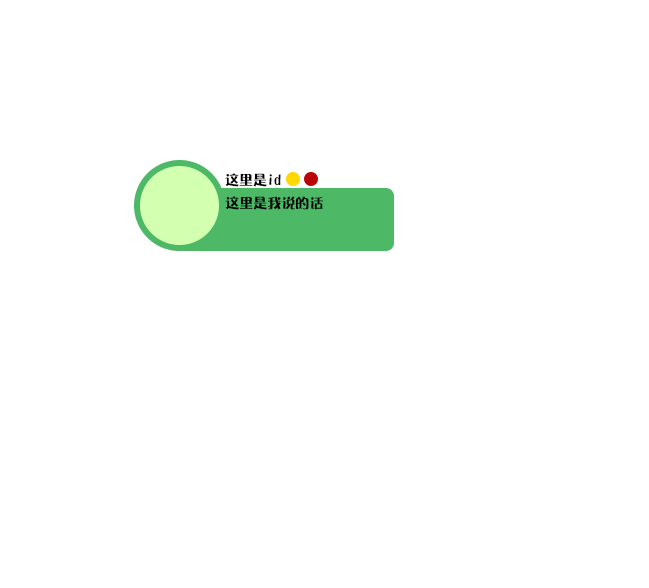
<style>
.page{position:relative;width:649px;height:588px;background:#ffffff}
.page>*{position:absolute;margin:0}
.t1{font:14px "DFPOP3W12";color:#000000}
</style>
<div class="page">
<p class="t1" style="left:225px;top:173px;width:56px;height:14px">这里是id</p>
<p class="t1" style="left:225px;top:196px;width:98px;height:14px">这里是我说的话</p>
</div>
